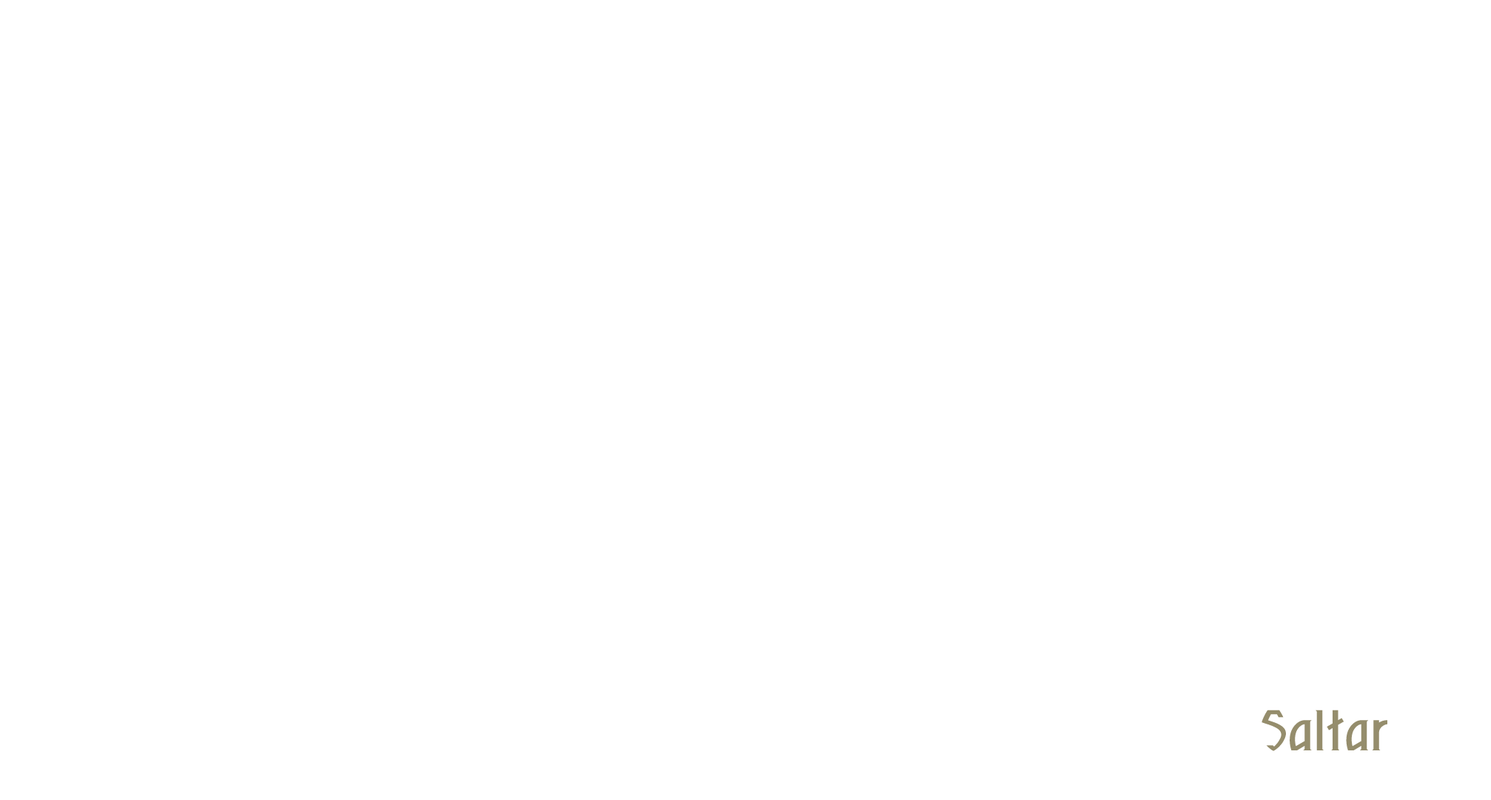
<style>
.page{position:relative;width:1491px;height:800px;background:#ffffff}
.page>*{position:absolute;margin:0}
.t1{font:53.3px "Kramola";color:#958d6c}
</style>
<div class="page">
<p class="t1" style="left:1262px;top:709px;width:126px;height:42px">Saltar</p>
</div>
